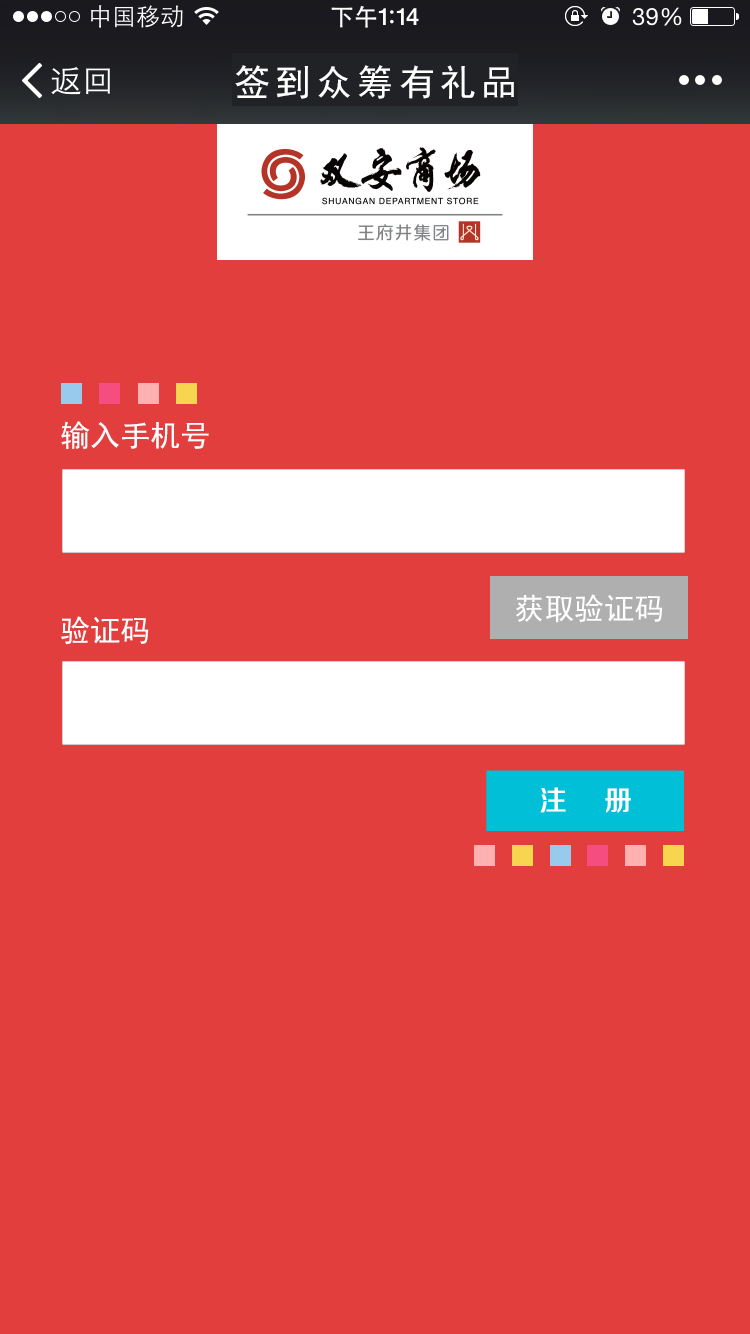
<style>
.page{position:relative;width:750px;height:1334px;background:#e13e3d}
.page>*{position:absolute;margin:0}
.t1{font:36px "SimHei";letter-spacing:0.14em;color:#ffffff}
.t2{font:30px "SimHei";color:#ffffff}
.t3{font:27.9px "FZZZHONGJW--GB1-0";color:#ffffff}
</style>
<div class="page">
<p class="t1" style="left:235px;top:65px;width:279px;height:34px">签到众筹有礼品</p>
<p class="t2" style="left:61px;top:421px;width:148px;height:29px">输入手机号</p>
<p class="t2" style="left:516px;top:594px;width:147px;height:29px">获取验证码</p>
<p class="t2" style="left:61px;top:616px;width:88px;height:29px">验证码</p>
<p class="t3" style="left:540px;top:787px;width:91px;height:26px">注    册</p>
</div>
